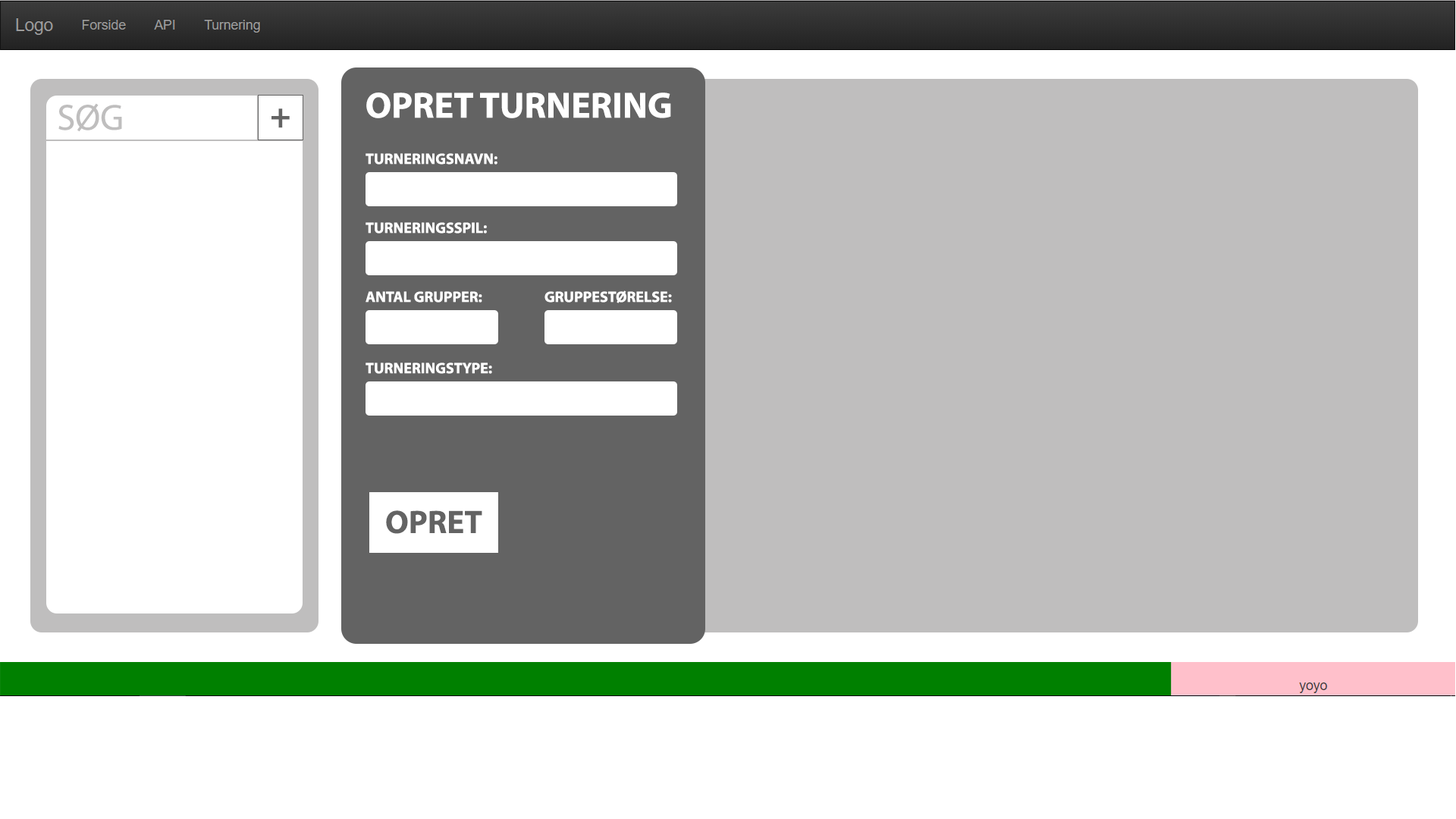
<style>
.page{position:relative;width:1456px;height:819px;background:#ffffff}
.page>*{position:absolute;margin:0}
.t1{font:36.4px "MyriadPro-Bold";color:#ffffff;text-transform:uppercase}
.t2{font:36.4px "MyriadPro-Regular";color:#bfbebe;text-transform:uppercase}
.t3{font:36.4px "Roboto-Regular";color:#636363;text-transform:uppercase}
.t4{font:15.2px "MyriadPro-Bold";color:#ffffff;text-transform:uppercase}
.t5{font:32.6px "MyriadPro-Bold";color:#636363;text-transform:uppercase}
</style>
<div class="page">
<p class="t1" style="left:366px;top:93px;width:305px;height:25px">Opret Turnering</p>
<p class="t2" style="left:58px;top:103px;width:64px;height:29px">Søg</p>
<p class="t3" style="left:271px;top:108px;width:19px;height:20px">+</p>
<p class="t4" style="left:366px;top:153px;width:131px;height:12px">TUrneringsnavn:</p>
<p class="t4" style="left:366px;top:222px;width:121px;height:12px">TUrneringsspil:</p>
<p class="t4" style="left:366px;top:291px;width:116px;height:12px">Antal Grupper:</p>
<p class="t4" style="left:544px;top:290px;width:128px;height:13px">Gruppestørelse:</p>
<p class="t4" style="left:366px;top:362px;width:126px;height:12px">TUrneringstype:</p>
<p class="t5" style="left:386px;top:510px;width:96px;height:24px">Opret</p>
</div>
